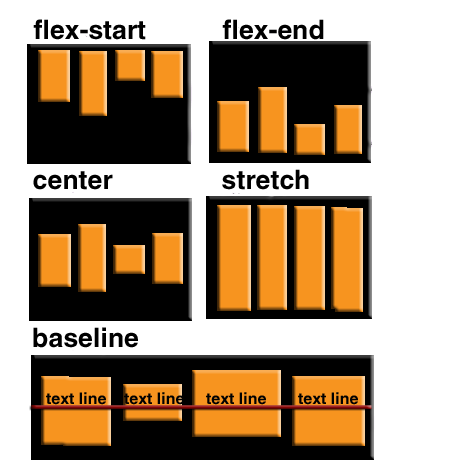
<style>
.page{position:relative;width:465px;height:470px;background:#ffffff}
.page>*{position:absolute;margin:0}
.t1{font:26.7px "HelveticaLTStd-Bold";color:#000000}
.t2{font:16px "HelveticaLTStd-Bold";color:#010101}
</style>
<div class="page">
<p class="t1" style="left:33px;top:19px;width:113px;height:21px">flex-start</p>
<p class="t1" style="left:222px;top:19px;width:102px;height:21px">flex-end</p>
<p class="t1" style="left:33px;top:171px;width:80px;height:19px">center</p>
<p class="t1" style="left:222px;top:169px;width:87px;height:21px">stretch</p>
<p class="t1" style="left:33px;top:327px;width:105px;height:21px">baseline</p>
<p class="t2" style="left:46px;top:392px;width:60px;height:13px">text line</p>
<p class="t2" style="left:124px;top:392px;width:60px;height:13px">text line</p>
<p class="t2" style="left:206px;top:392px;width:60px;height:13px">text line</p>
<p class="t2" style="left:298px;top:392px;width:60px;height:13px">text line</p>
</div>
